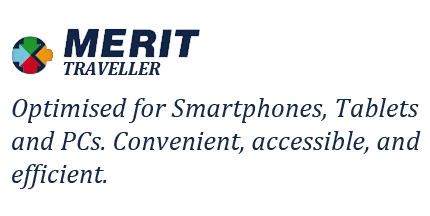
<style>
.page{position:relative;width:430px;height:216px;background:#ffffff}
.page>*{position:absolute;margin:0}
.t1{font:18.7px "Cambria-BoldItalic";color:#152546}
.t2{font:27.5px "Cambria-Italic";color:#152848}
</style>
<div class="page">
<p class="t1" style="left:63px;top:62px;width:98px;height:13px">TRAVELLER</p>
<p class="t2" style="left:12px;top:98px;width:409px;height:91px">Optimised for Smartphones, Tablets<br>and PCs. Convenient, accessible, and<br>efficient.</p>
</div>
